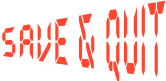
<style>
.page{position:relative;width:166px;height:81px;background:#ffffff}
.page>*{position:absolute;margin:0}
.t1{font:75px "QuartzMS";color:#ff462e;scale:0.38 1}
</style>
<div class="page">
<p class="t1" style="left:2px;top:0px;width:164px;height:82px">SAVE &amp; QUIT</p>
</div>
